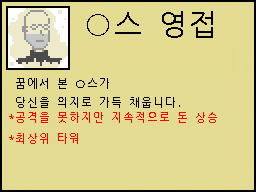
<style>
.page{position:relative;width:256px;height:192px;background:#e4db92}
.page>*{position:absolute;margin:0}
.t1{font:30px "NanumGothicCoding";color:#000000}
.t2{font:11px "NanumGothicCoding";color:#000000}
.t3{font:11px "NanumGothicCoding";color:#ff0000}
</style>
<div class="page">
<p class="t1" style="left:87px;top:11px;width:126px;height:27px">○스 영접</p>
<p class="t2" style="left:16px;top:78px;width:164px;height:30px">꿈에서 본 ○스가<br>당신을 의지로 가득 채웁니다.</p>
<p class="t3" style="left:9px;top:112px;width:208px;height:11px">*공격을 못하지만 지속적으로 돈 상승</p>
<p class="t3" style="left:9px;top:133px;width:69px;height:11px">*최상위 타워</p>
</div>
